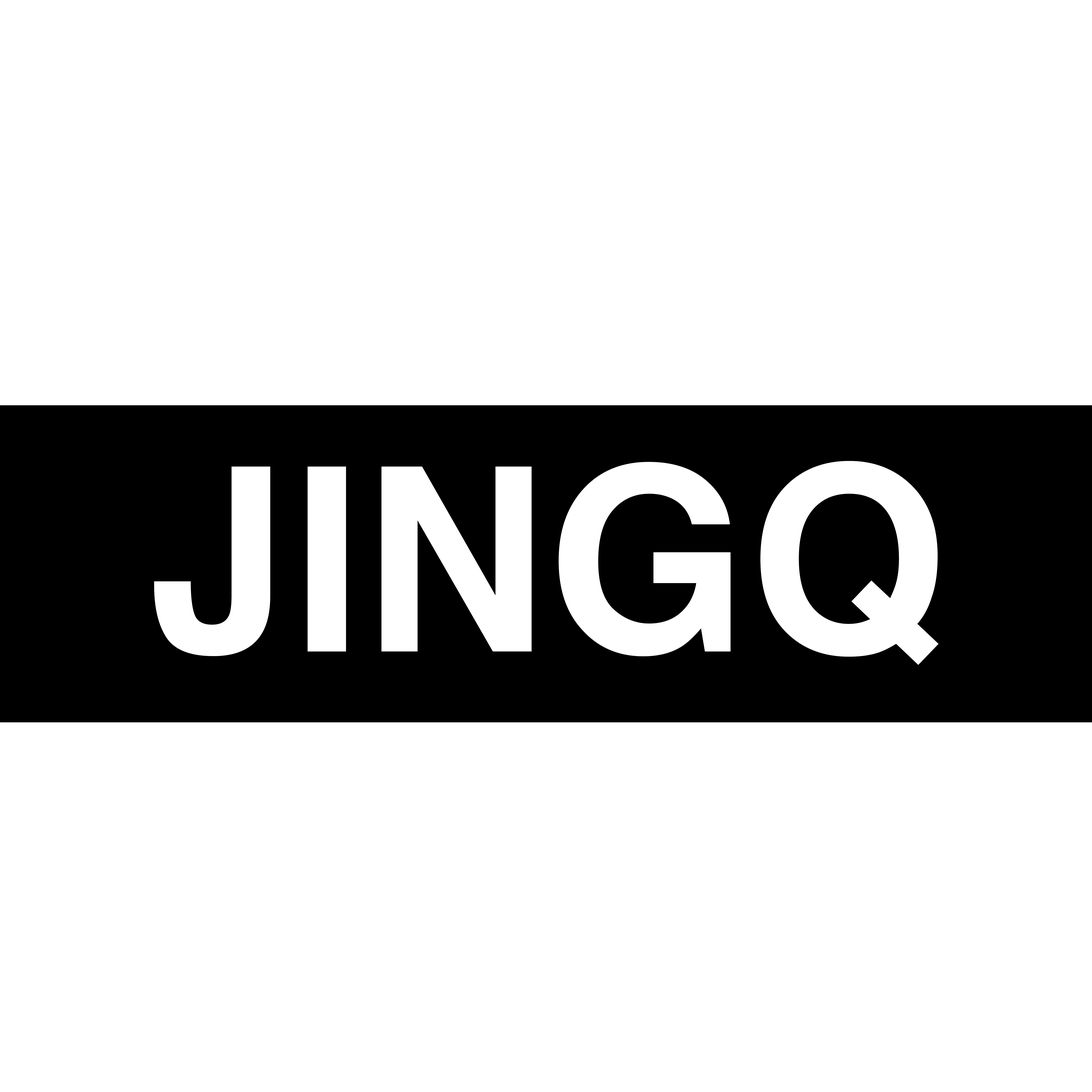
<style>
.page{position:relative;width:1092px;height:1092px;background:#ffffff}
.page>*{position:absolute;margin:0}
.t1{font:256.8px "Helvetica-Bold";color:#ffffff}
</style>
<div class="page">
<p class="t1" style="left:154px;top:461px;width:785px;height:204px">JINGQ</p>
</div>
